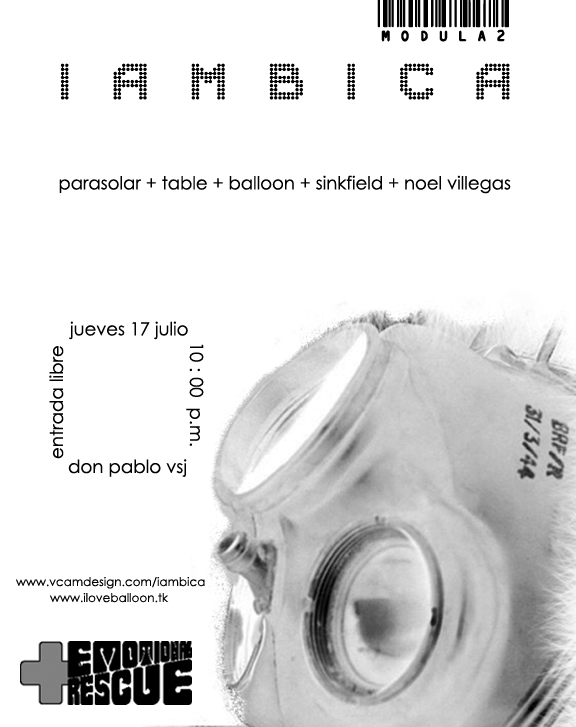
<style>
.page{position:relative;width:576px;height:727px;background:#ffffff}
.page>*{position:absolute;margin:0}
.t1{font:46.8px "CODE3X";color:#000000}
.t2{font:42.4px "Sucaba";color:#000000}
.t3{font:18.2px "CenturyGothic";color:#000000}
.t4{font:12px "CenturyGothic";color:#000000}
</style>
<div class="page">
<p class="t1" style="left:377px;top:0px;width:132px;height:42px">modula2</p>
<p class="t2" style="left:60px;top:63px;width:450px;height:37px">I   A   M   B   I   C   A</p>
<p class="t3" style="left:59px;top:175px;width:452px;height:19px">parasolar + table + balloon + sinkfield + noel villegas</p>
<p class="t3" style="left:69px;top:321px;width:119px;height:19px">jueves 17 julio</p>
<p class="t3" style="left:49px;top:346px;width:15px;height:113px;rotate:-90deg">entrada libre</p>
<p class="t3" style="left:186px;top:344px;width:18px;height:102px;rotate:90deg">10 : 00  p.m.</p>
<p class="t3" style="left:68px;top:459px;width:119px;height:18px">don pablo vsj</p>
<p class="t4" style="left:16px;top:577px;width:189px;height:12px">www.vcamdesign.com/iambica</p>
<p class="t4" style="left:50px;top:593px;width:119px;height:10px">www.iloveballoon.tk</p>
</div>
